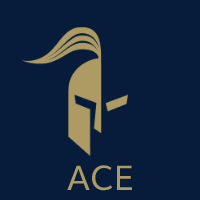
<style>
.page{position:relative;width:200px;height:200px;background:#061c3a}
.page>*{position:absolute;margin:0}
.t1{font:34.2px "Muli";color:#ad9b63}
</style>
<div class="page">
<p class="t1" style="left:67px;top:165px;width:65px;height:26px">ACE</p>
</div>
